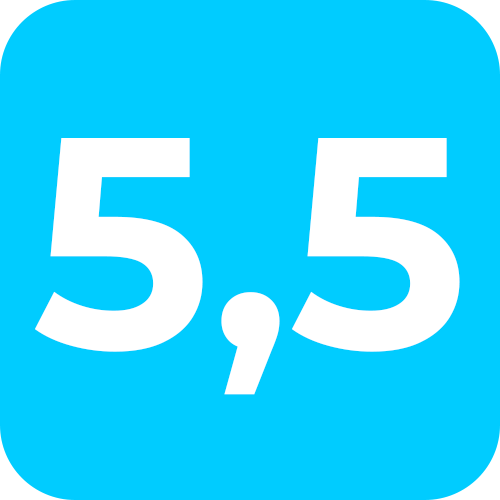
<style>
.page{position:relative;width:500px;height:500px;background:#00ccff}
.page>*{position:absolute;margin:0}
.t1{font:300px "Montserrat-Bold";color:#ffffff}
</style>
<div class="page">
<p class="t1" style="left:35px;top:138px;width:425px;height:257px">5,5</p>
</div>
